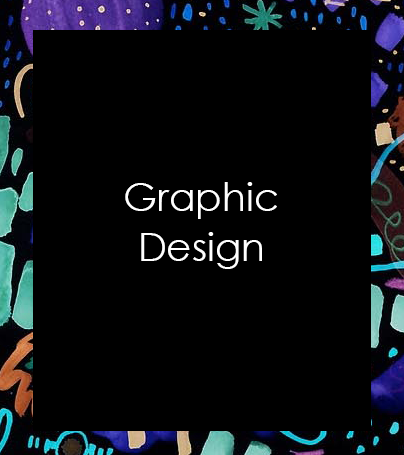
<style>
.page{position:relative;width:404px;height:455px;background:#000000}
.page>*{position:absolute;margin:0}
.t1{font:38.9px/50px "CenturyGothic";color:#ffffff}
</style>
<div class="page">
<p class="t1" style="left:125px;top:182px;width:152px;height:87px;text-align:center">Graphic<br>Design</p>
</div>
